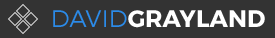
<style>
.page{position:relative;width:275px;height:38px;background:#333333}
.page>*{position:absolute;margin:0}
.t1{font:24px "Montserrat-Bold";color:#ffffff}
.t2{font:24px "Montserrat-Light";color:#2b8be9}
</style>
<div class="page">
<p class="t1" style="left:53px;top:10px;width:212px;height:18px"><span class="t2">DAVID</span>GRAYLAND</p>
</div>
